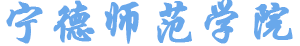
<style>
.page{position:relative;width:300px;height:46px;background:#ffffff}
.page>*{position:absolute;margin:0}
.t1{font:48px "STXingkai";color:#69a8eb;font-weight:bold}
</style>
<div class="page">
<p class="t1" style="left:6px;top:0px;width:287px;height:44px">宁德师范学院</p>
</div>
